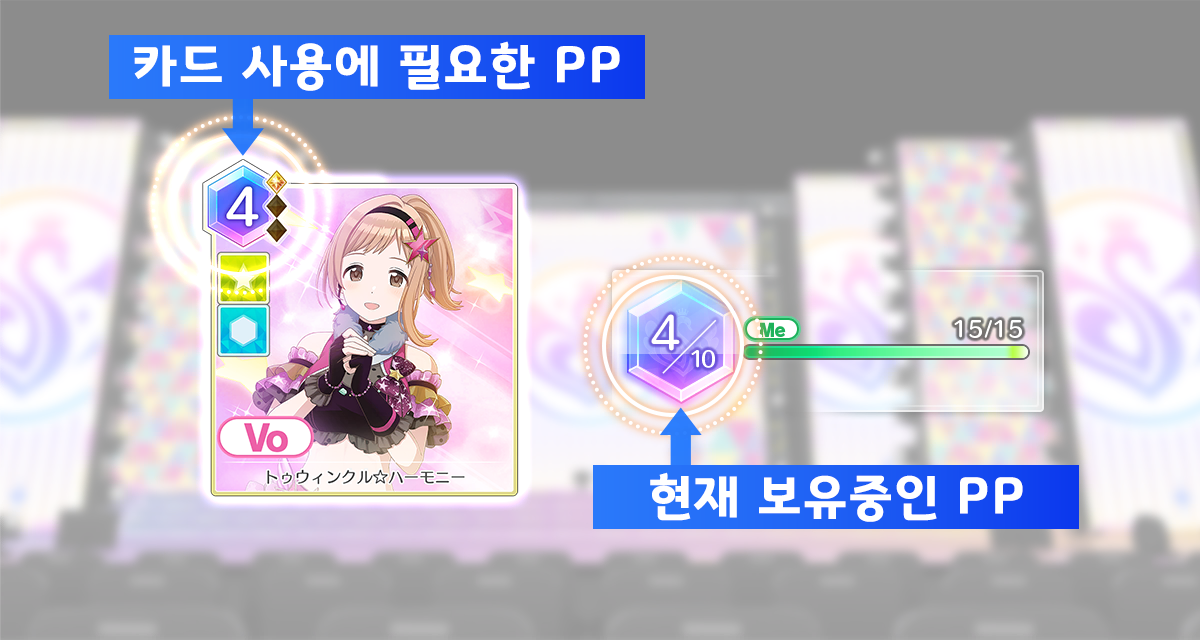
<style>
.page{position:relative;width:1200px;height:640px}
.page>*{position:absolute;margin:0}
.t1{font:50.7px "GyeonggiTitleB";letter-spacing:0.05em;color:#ffffff}
</style>
<div class="page">
<p class="t1" style="left:134px;top:41px;width:486px;height:50px">카드 사용에 필요한 PP</p>
<p class="t1" style="left:650px;top:472px;width:373px;height:50px">현재 보유중인 PP</p>
</div>
